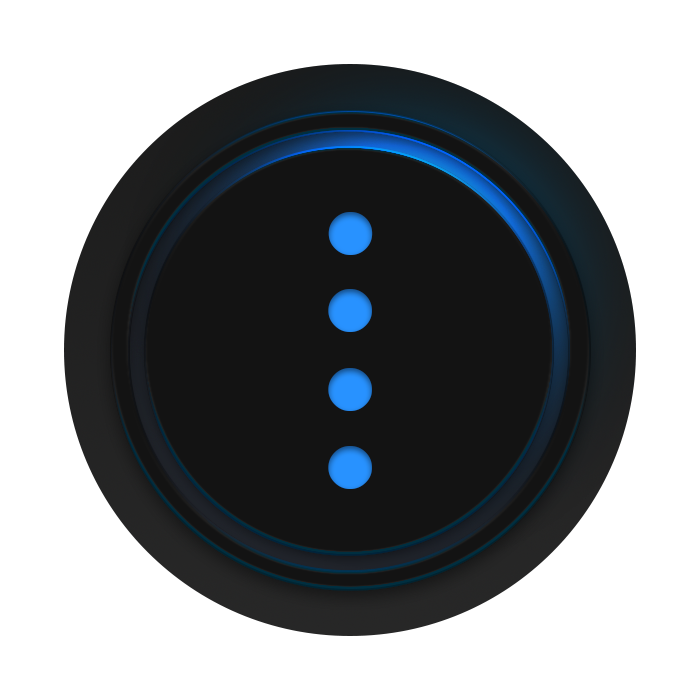
<style>
.page{position:relative;width:700px;height:700px;background:#ffffff}
.page>*{position:absolute;margin:0}
.t1{font:400px "TimesNewRomanPSMT";color:#2891fe}
</style>
<div class="page">
<p class="t1" style="left:328px;top:212px;width:45px;height:277px">⁞</p>
</div>
